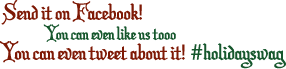
<style>
.page{position:relative;width:286px;height:69px;background:#ffffff}
.page>*{position:absolute;margin:0}
.t1{font:22px "ChristmasCardII";color:#7e1905}
.t2{font:22px "MyriadPro-Regular";color:#7e1905}
.t3{font:18px "ChristmasCardII";color:#16572d}
.t4{font:22px "Helvetica";color:#16572d}
.t5{font:22px "ChristmasCardII";color:#16572d}
</style>
<div class="page">
<p class="t1" style="left:1px;top:0px;width:141px;height:25px">Send it on Facebook<span class="t2">!</span></p>
<p class="t3" style="left:43px;top:24px;width:133px;height:18px">You can even like us tooo</p>
<p class="t1" style="left:0px;top:41px;width:286px;height:28px">You can even tweet about it<span class="t2">! </span><span class="t4">#</span><span class="t5">holidayswag</span></p>
</div>
